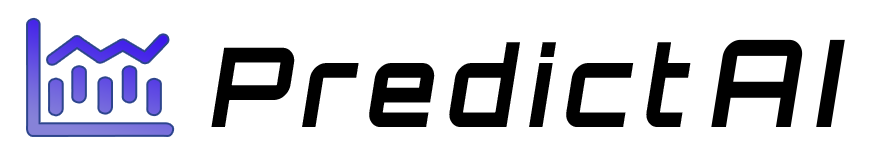
<style>
.page{position:relative;width:883px;height:153px;background:#ffffff}
.page>*{position:absolute;margin:0}
.t1{font:121px "Orbitron-Bold";letter-spacing:0.12em;color:#000000;font-style:italic;scale:0.91 1}
.t2{font:110px "Orbitron-Bold";letter-spacing:0.12em;color:#000000;font-style:italic;scale:0.91 1}
</style>
<div class="page">
<p class="t1" style="left:711px;top:39px;width:134px;height:88px">AI</p>
<p class="t2" style="left:211px;top:42px;width:480px;height:85px">Predict</p>
</div>
